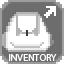
<style>
.page{position:relative;width:64px;height:64px;background:#6d6d6d}
.page>*{position:absolute;margin:0}
.t1{font:10px "MyriadPro-Regular";color:#ffffff}
</style>
<div class="page">
<p class="t1" style="left:9px;top:54px;width:48px;height:7px">INVENTORY</p>
</div>
